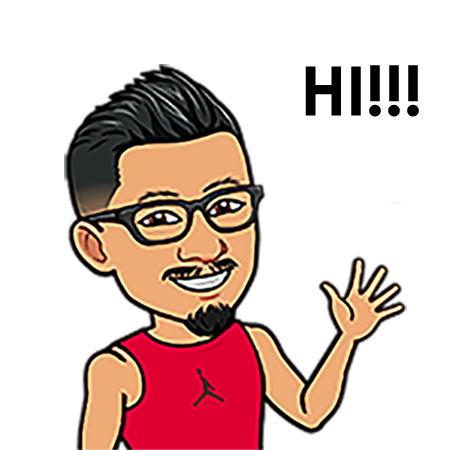
<style>
.page{position:relative;width:450px;height:450px;background:#ffffff}
.page>*{position:absolute;margin:0}
.t1{font:67.8px "CenturyGothic-Bold";color:#000000}
</style>
<div class="page">
<p class="t1" style="left:305px;top:65px;width:114px;height:52px">HI!!!</p>
</div>
